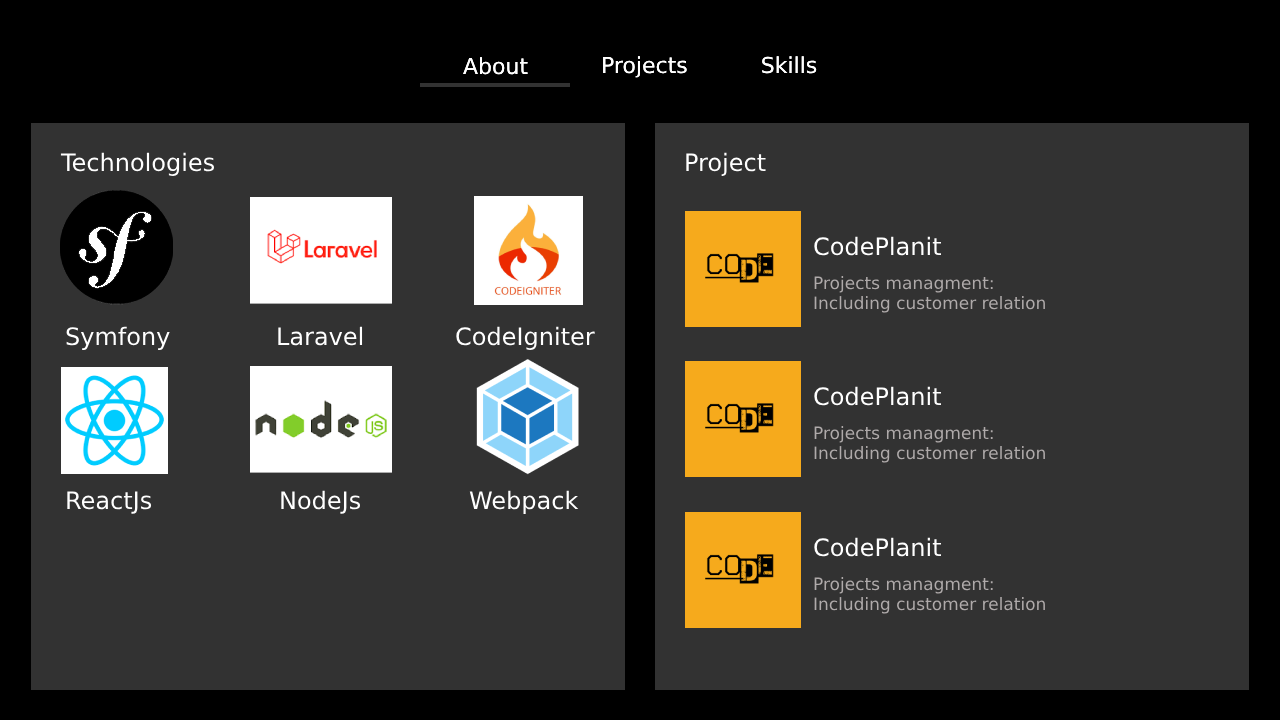
<style>
.page{position:relative;width:1280px;height:720px;background:#323232}
.page>*{position:absolute;margin:0}
.t1{font:24px "DejaVuSans";color:#ffffff}
.t2{font:24px "DejaVuSans";color:#000000}
.t3{font:17px "DejaVuSans";color:#afaaaa}
</style>
<div class="page">
<p class="t1" style="left:60px;top:152px;width:154px;height:24px"><span class="t2">T</span>echnologies</p>
<p class="t1" style="left:686px;top:152px;width:80px;height:24px">Project</p>
<p class="t1" style="left:814px;top:236px;width:128px;height:20px">CodePlanit</p>
<p class="t3" style="left:814px;top:276px;width:231px;height:37px">Projects managment:<br>Including customer relation</p>
<p class="t1" style="left:66px;top:326px;width:104px;height:24px">Symfony</p>
<p class="t1" style="left:278px;top:326px;width:85px;height:20px">Laravel</p>
<p class="t1" style="left:456px;top:326px;width:139px;height:24px">CodeIgniter</p>
<p class="t1" style="left:814px;top:386px;width:128px;height:20px">CodePlanit</p>
<p class="t3" style="left:814px;top:426px;width:231px;height:37px">Projects managment:<br>Including customer relation</p>
<p class="t1" style="left:67px;top:491px;width:85px;height:23px">ReactJs</p>
<p class="t1" style="left:281px;top:490px;width:80px;height:24px">NodeJs</p>
<p class="t1" style="left:469px;top:490px;width:110px;height:24px">Webpack</p>
<p class="t1" style="left:814px;top:537px;width:128px;height:20px">CodePlanit</p>
<p class="t3" style="left:814px;top:577px;width:231px;height:37px">Projects managment:<br>Including customer relation</p>
</div>
